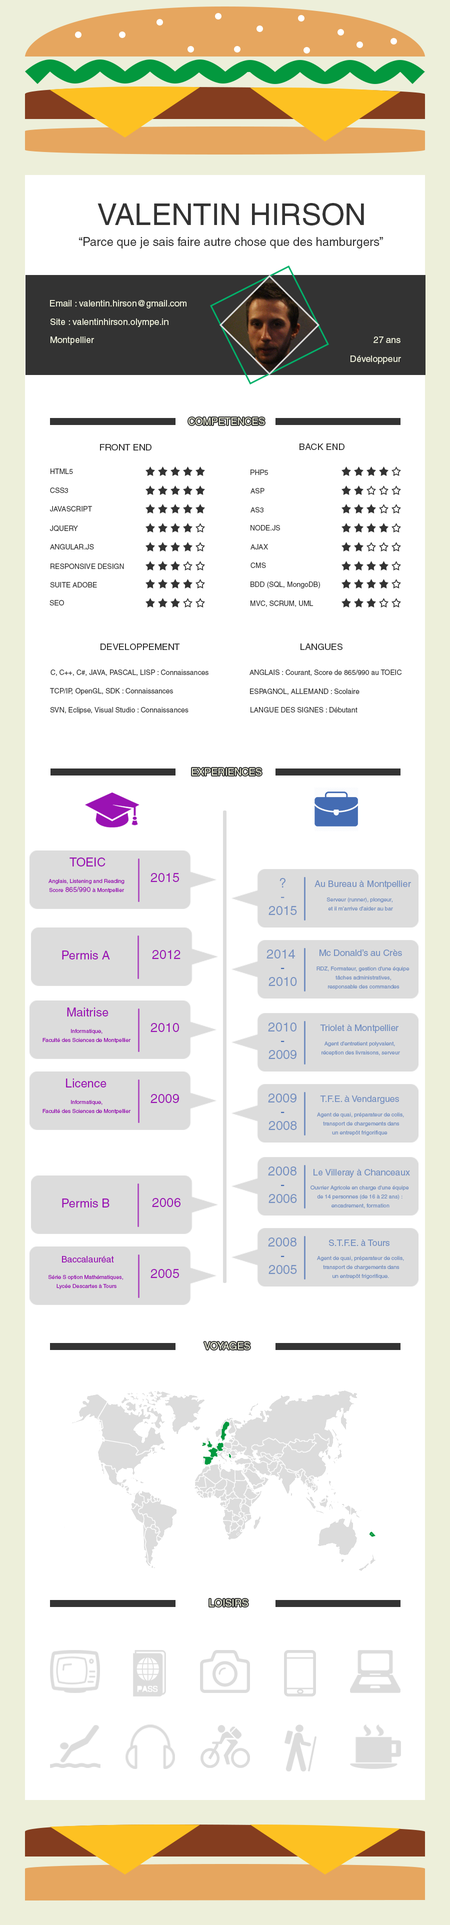
<style>
.page{position:relative;width:450px;height:1925px;background:#ffffff}
.page>*{position:absolute;margin:0}
.t1{font:30px "Helvetica";color:#333333}
.t2{font:12px "Helvetica";color:#333333}
.t3{font:9px "Helvetica";color:#edefda}
.t4{font:10px "Helvetica";color:#edefda}
.t5{font:9px "Helvetica";color:#333333}
.t6{font:7px "Helvetica";color:#333333}
.t7{font:12px "Helvetica";color:#9a12b3}
.t8{font:5.5px/9px "Helvetica";color:#9a12b3}
.t9{font:7px/9px "Helvetica";color:#9a12b3}
.t10{font:13px "Helvetica";color:#9a12b3}
.t11{font:13px "Helvetica";color:#7590c0}
.t12{font:9px "Helvetica";color:#7590c0}
.t13{font:5.5px/9px "Helvetica";color:#7590c0}
.t14{font:13px "Helvetica";color:#446cb3}
.t15{font:9px "Helvetica";color:#9a12b3}
</style>
<div class="page">
<p class="t1" style="left:98px;top:203px;width:266px;height:23px">VALENTIN HIRSON</p>
<p class="t2" style="left:79px;top:237px;width:304px;height:11px">“Parce que je sais faire autre chose que des hamburgers”</p>
<p class="t3" style="left:50px;top:300px;width:136px;height:8px">Email : valentin.hirson@gmail.com</p>
<p class="t3" style="left:50px;top:318px;width:118px;height:9px">Site : valentinhirson.olympe.in</p>
<p class="t3" style="left:50px;top:336px;width:44px;height:9px">Montpellier</p>
<p class="t3" style="left:374px;top:336px;width:26px;height:7px">27 ans</p>
<p class="t3" style="left:350px;top:356px;width:51px;height:8px">Développeur</p>
<p class="t4" style="left:188px;top:418px;width:76px;height:7px">COMPETENCES</p>
<p class="t5" style="left:100px;top:444px;width:52px;height:6px">FRONT END</p>
<p class="t5" style="left:300px;top:443px;width:44px;height:7px">BACK END</p>
<p class="t6" style="left:50px;top:468px;width:23px;height:6px">HTML5</p>
<p class="t6" style="left:250px;top:470px;width:18px;height:5px">PHP5</p>
<p class="t6" style="left:50px;top:488px;width:18px;height:5px">CSS3</p>
<p class="t6" style="left:250px;top:488px;width:14px;height:6px">ASP</p>
<p class="t6" style="left:50px;top:506px;width:42px;height:6px">JAVASCRIPT</p>
<p class="t6" style="left:250px;top:507px;width:14px;height:5px">AS3</p>
<p class="t6" style="left:50px;top:526px;width:28px;height:6px">JQUERY</p>
<p class="t6" style="left:250px;top:525px;width:30px;height:5px">NODE.JS</p>
<p class="t6" style="left:50px;top:544px;width:44px;height:6px">ANGULAR.JS</p>
<p class="t6" style="left:250px;top:544px;width:18px;height:6px">AJAX</p>
<p class="t6" style="left:50px;top:564px;width:74px;height:5px">RESPONSIVE DESIGN</p>
<p class="t6" style="left:250px;top:562px;width:16px;height:6px">CMS</p>
<p class="t6" style="left:50px;top:582px;width:47px;height:6px">SUITE ADOBE</p>
<p class="t6" style="left:250px;top:582px;width:70px;height:6px">BDD (SQL, MongoDB)</p>
<p class="t6" style="left:50px;top:600px;width:14px;height:6px">SEO</p>
<p class="t6" style="left:250px;top:600px;width:64px;height:7px">MVC, SCRUM, UML</p>
<p class="t5" style="left:100px;top:644px;width:80px;height:6px">DEVELOPPEMENT</p>
<p class="t5" style="left:300px;top:643px;width:42px;height:7px">LANGUES</p>
<p class="t6" style="left:50px;top:670px;width:158px;height:6px">C, C++, C#, JAVA, PASCAL, LISP : Connaissances</p>
<p class="t6" style="left:250px;top:670px;width:152px;height:6px">ANGLAIS : Courant, Score de 865/990 au TOEIC</p>
<p class="t6" style="left:50px;top:688px;width:123px;height:7px">TCP/IP, OpenGL, SDK : Connaissances</p>
<p class="t6" style="left:250px;top:688px;width:110px;height:7px">ESPAGNOL, ALLEMAND : Scolaire</p>
<p class="t6" style="left:50px;top:707px;width:138px;height:7px">SVN, Eclipse, Visual Studio : Connaissances</p>
<p class="t6" style="left:250px;top:707px;width:108px;height:5px">LANGUE DES SIGNES : Débutant</p>
<p class="t4" style="left:192px;top:768px;width:70px;height:8px">EXPERIENCES</p>
<p class="t7" style="left:70px;top:858px;width:36px;height:8px">TOEIC</p>
<p class="t8" style="left:48px;top:879px;width:76px;height:14px;text-align:center">Anglais, Listening and Reading<br>Score<span class="t9"> 865/990 </span>à Montpellier</p>
<p class="t10" style="left:150px;top:873px;width:29px;height:9px">2015</p>
<p class="t11" style="left:280px;top:878px;width:6px;height:10px">?</p>
<p class="t12" style="left:314px;top:880px;width:97px;height:9px">Au Bureau à Montpellier</p>
<p class="t11" style="left:281px;top:896px;width:3px;height:2px">-</p>
<p class="t13" style="left:326px;top:898px;width:67px;height:12px;text-align:center">Serveur (runner), plongeur, <br>et il m’arrive d’aider au bar</p>
<p class="t11" style="left:268px;top:906px;width:29px;height:9px">2015</p>
<p class="t7" style="left:62px;top:950px;width:48px;height:10px">Permis A</p>
<p class="t10" style="left:152px;top:950px;width:28px;height:9px">2012</p>
<p class="t11" style="left:266px;top:950px;width:29px;height:8px">2014</p>
<p class="t12" style="left:320px;top:950px;width:82px;height:6px">Mc Donald’s au Crès</p>
<p class="t11" style="left:268px;top:977px;width:29px;height:9px">2010</p>
<p class="t14" style="left:281px;top:968px;width:3px;height:1px">-</p>
<p class="t13" style="left:316px;top:966px;width:94px;height:24px;text-align:center">RDZ, Formateur, gestion d'une équipe <br> tâches administratives, <br>responsable des commandes</p>
<p class="t7" style="left:67px;top:1008px;width:41px;height:8px">Maitrise</p>
<p class="t10" style="left:150px;top:1023px;width:29px;height:9px">2010</p>
<p class="t11" style="left:268px;top:1022px;width:28px;height:10px">2010</p>
<p class="t12" style="left:320px;top:1024px;width:78px;height:9px">Triolet à Montpellier</p>
<p class="t8" style="left:42px;top:1029px;width:89px;height:14px;text-align:center">Informatique,<br>Faculté des Sciences de Montpellier</p>
<p class="t14" style="left:281px;top:1040px;width:3px;height:2px">-</p>
<p class="t13" style="left:322px;top:1042px;width:78px;height:14px;text-align:center">Agent d’entretient polyvalent, <br>réception des livraisons, serveur</p>
<p class="t11" style="left:268px;top:1050px;width:28px;height:9px">2009</p>
<p class="t7" style="left:66px;top:1078px;width:40px;height:10px">Licence</p>
<p class="t10" style="left:150px;top:1094px;width:29px;height:9px">2009</p>
<p class="t11" style="left:268px;top:1094px;width:28px;height:8px">2009</p>
<p class="t12" style="left:320px;top:1096px;width:79px;height:8px">T.F.E. à Vendargues</p>
<p class="t8" style="left:42px;top:1100px;width:89px;height:14px;text-align:center">Informatique,<br>Faculté des Sciences de Montpellier</p>
<p class="t11" style="left:268px;top:1121px;width:29px;height:9px">2008</p>
<p class="t14" style="left:281px;top:1112px;width:3px;height:1px">-</p>
<p class="t13" style="left:317px;top:1112px;width:87px;height:24px;text-align:center">Agent de quai, préparateur de colis,<br> transport de chargements dans<br>un entrepôt frigorifique</p>
<p class="t11" style="left:268px;top:1166px;width:28px;height:10px">2008</p>
<p class="t12" style="left:314px;top:1169px;width:96px;height:9px">Le Villeray à Chanceaux</p>
<p class="t14" style="left:281px;top:1184px;width:3px;height:2px">-</p>
<p class="t13" style="left:310px;top:1186px;width:99px;height:22px;text-align:center">Ouvrier Agricole en charge d'une équipe <br>de 14 personnes (de 16 à 22 ans) : <br>encadrement, formation</p>
<p class="t7" style="left:62px;top:1198px;width:48px;height:10px">Permis B</p>
<p class="t10" style="left:152px;top:1198px;width:28px;height:9px">2006</p>
<p class="t11" style="left:268px;top:1194px;width:29px;height:9px">2006</p>
<p class="t11" style="left:268px;top:1238px;width:28px;height:8px">2008</p>
<p class="t12" style="left:329px;top:1240px;width:61px;height:6px">S.T.F.E. à Tours</p>
<p class="t15" style="left:62px;top:1256px;width:52px;height:6px">Baccalauréat</p>
<p class="t11" style="left:268px;top:1265px;width:29px;height:9px">2005</p>
<p class="t14" style="left:281px;top:1256px;width:3px;height:1px">-</p>
<p class="t13" style="left:317px;top:1256px;width:87px;height:23px;text-align:center">Agent de quai, préparateur de colis,<br> transport de chargements dans<br>un entrepôt frigorifique.</p>
<p class="t8" style="left:48px;top:1275px;width:75px;height:15px;text-align:center">Série S option Mathématiques, <br>Lycée Descartes à Tours</p>
<p class="t10" style="left:150px;top:1269px;width:29px;height:9px">2005</p>
<p class="t4" style="left:204px;top:1342px;width:46px;height:8px">VOYAGES</p>
<p class="t4" style="left:210px;top:1599px;width:38px;height:7px">LOISIRS</p>
</div>
